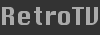
<style>
.page{position:relative;width:100px;height:35px;background:#333333}
.page>*{position:absolute;margin:0}
.t1{font:24px "Krungthep";color:#aaaaaa}
</style>
<div class="page">
<p class="t1" style="left:2px;top:7px;width:96px;height:18px">RetroTV</p>
</div>
